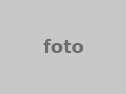
<style>
.page{position:relative;width:126px;height:94px;background:#c8c8c8}
.page>*{position:absolute;margin:0}
.t1{font:18px "Verdana-Bold";color:#6d6d6d}
</style>
<div class="page">
<p class="t1" style="left:43px;top:39px;width:41px;height:14px">foto</p>
</div>
